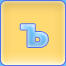
<style>
.page{position:relative;width:66px;height:66px}
.page>*{position:absolute;margin:0}
.t1{font:41px "Tahoma-Bold"}
</style>
<div class="page">
<p class="t1" style="left:20px;top:24px;width:28px;height:23px">ъ</p>
<p class="t1" style="left:20px;top:24px;width:28px;height:23px">ъ</p>
</div>
